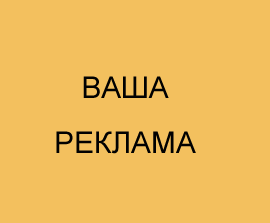
<style>
.page{position:relative;width:270px;height:223px;background:#f3c05e}
.page>*{position:absolute;margin:0}
.t1{font:30px/45px "ArialMT";color:#010101}
</style>
<div class="page">
<p class="t1" style="left:56px;top:76px;width:140px;height:78px;text-align:center">ВАША<br>РЕКЛАМА</p>
</div>
